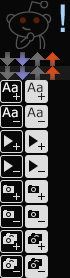
<style>
.page{position:relative;width:70px;height:278px;background:#080808}
.page>*{position:absolute;margin:0}
.t1{font:13px "Verdana";color:#ffffff}
.t2{font:13px "Verdana";color:#222222}
</style>
<div class="page">
<p class="t1" style="left:2px;top:82px;width:16px;height:11px">Aa</p>
<p class="t2" style="left:27px;top:82px;width:16px;height:11px">Aa</p>
<p class="t1" style="left:2px;top:107px;width:16px;height:11px">Aa</p>
<p class="t2" style="left:27px;top:107px;width:16px;height:11px">Aa</p>
</div>
